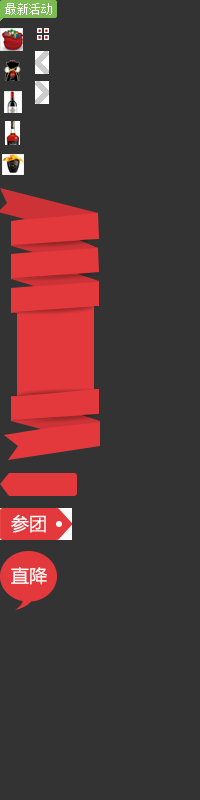
<style>
.page{position:relative;width:200px;height:800px;background:#333333}
.page>*{position:absolute;margin:0}
.t1{font:12px "NSimSun";color:#ffffff;text-transform:uppercase}
.t2{font:18px "MicrosoftYaHei";color:#ffffff}
</style>
<div class="page">
<p class="t1" style="left:5px;top:3px;width:47px;height:12px">最新活动</p>
<p class="t2" style="left:11px;top:567px;width:36px;height:18px">直降</p>
</div>
